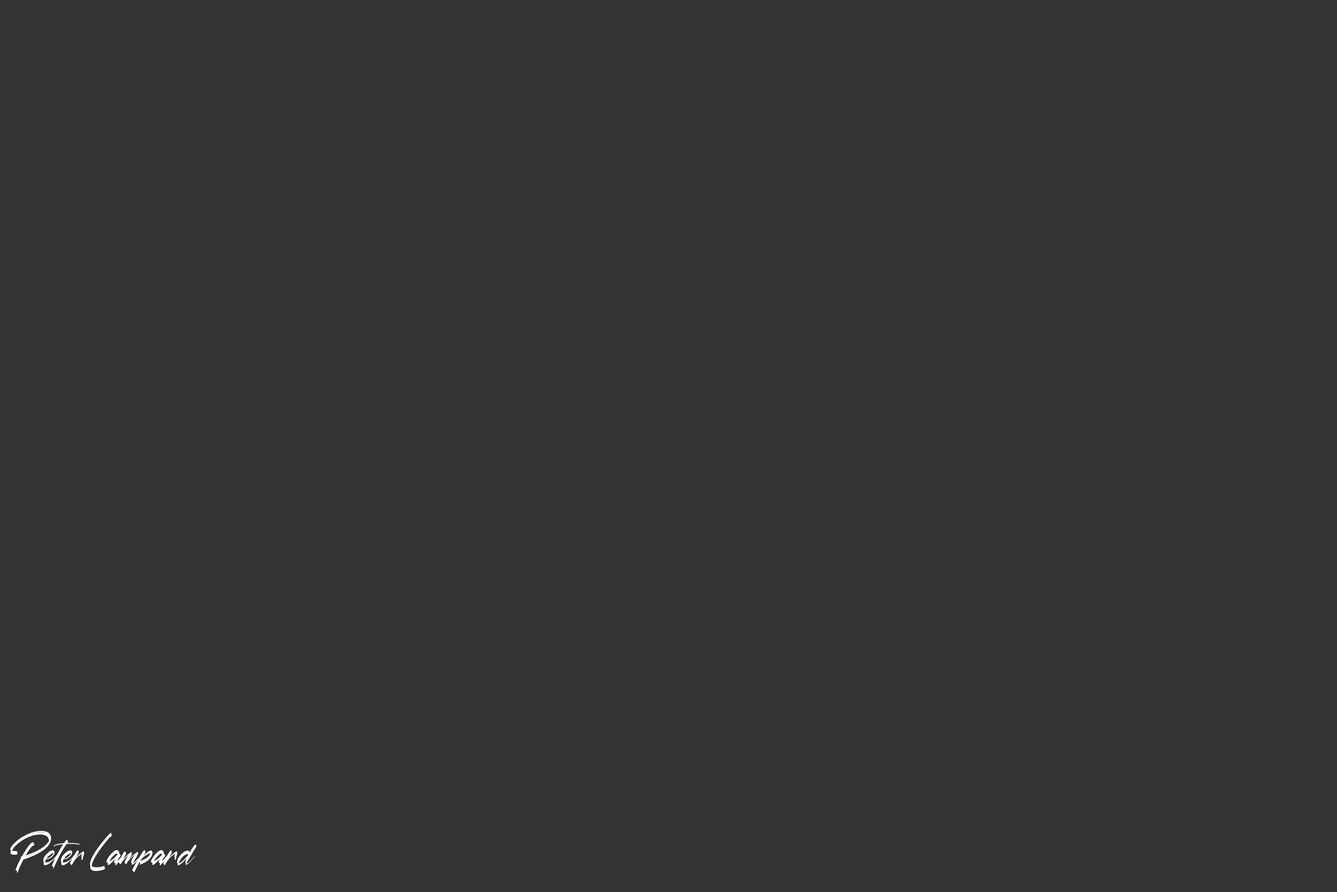
<style>
.page{position:relative;width:1337px;height:892px;background:#333333}
.page>*{position:absolute;margin:0}
.t1{font:33.4px "Austhind";color:#ffffff;font-style:italic}
</style>
<div class="page">
<p class="t1" style="left:10px;top:831px;width:187px;height:42px">Peter Lampard</p>
</div>
